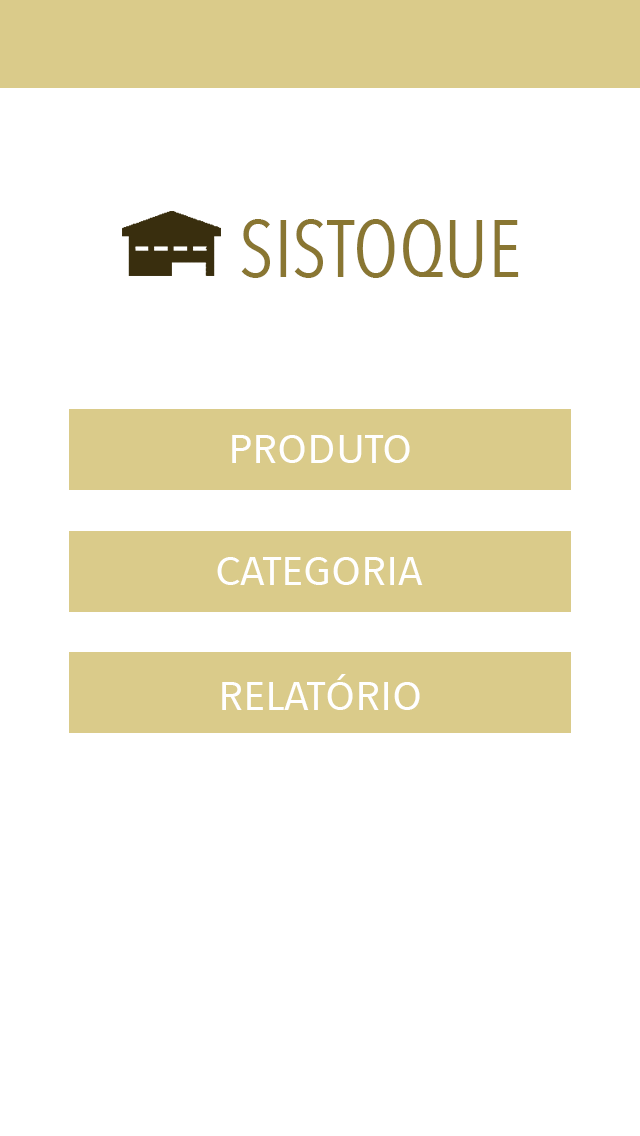
<style>
.page{position:relative;width:640px;height:1136px;background:#ffffff}
.page>*{position:absolute;margin:0}
.t1{font:80px "AvenirNextCondensed-Regular";color:#897632}
.t2{font:40px "AvenirNextCondensed-Regular";color:#ffffff;scale:1.31 1}
</style>
<div class="page">
<p class="t1" style="left:241px;top:219px;width:278px;height:59px">SISTOQUE</p>
<p class="t2" style="left:232px;top:435px;width:178px;height:28px">PRODUTO</p>
<p class="t2" style="left:217px;top:557px;width:206px;height:28px">CATEGORIA</p>
<p class="t2" style="left:222px;top:674px;width:198px;height:36px">RELATÓRIO</p>
</div>
